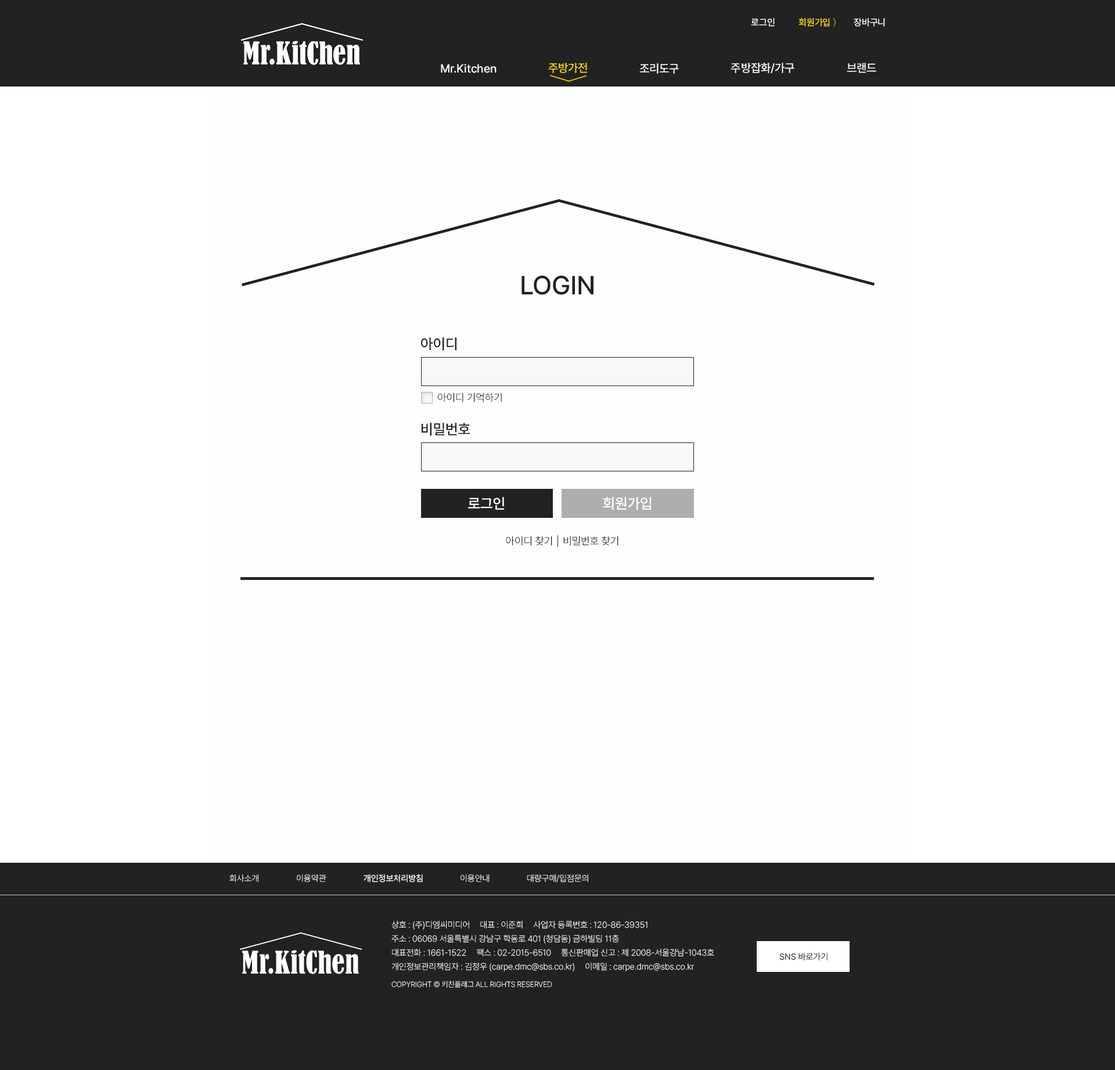
<style>
.page{position:relative;width:1115px;height:1070px;background:#fefefe}
.page>*{position:absolute;margin:0}
.t1{font:9.3px "Pretendard-Regular";letter-spacing:-0.005em;color:#ffffff}
.t2{font:9.3px "Pretendard-Regular";letter-spacing:-0.005em;color:#ffd801}
.t3{font:11.6px "Pretendard-Medium";letter-spacing:-0.005em;color:#ffffff}
.t4{font:11.6px "Pretendard-Medium";letter-spacing:-0.005em;color:#ffd801}
.t5{font:26.1px "PretendardVariable-Medium";letter-spacing:-0.005em;color:#222222}
.t6{font:14.5px "PretendardVariable-Medium";letter-spacing:-0.005em;color:#222222}
.t7{font:10.4px "PretendardVariable-Light";letter-spacing:-0.005em;color:#222222}
.t8{font:14.5px "PretendardVariable-Medium";letter-spacing:-0.005em;color:#ffffff}
.t9{font:8.7px "PretendardVariable-ExtraLight";letter-spacing:-0.005em;color:#ffffff}
.t10{font:8.7px "PretendardVariable-ExtraLight";letter-spacing:-0.005em}
.t11{font:8.7px "PretendardVariable-Regular";letter-spacing:-0.005em;color:#ffffff}
.t12{font:8.7px/13.9px "PretendardVariable-ExtraLight";letter-spacing:-0.005em;color:#fefefe}
.t13{font:8.7px "PretendardVariable-ExtraLight";letter-spacing:-0.005em;color:#fefefe}
.t14{font:7.5px/17.4px "PretendardVariable-ExtraLight";letter-spacing:-0.005em;color:#fefefe}
.t15{font:8.7px "PretendardVariable-Regular";letter-spacing:-0.005em;color:#333333}
</style>
<div class="page">
<p class="t1" style="left:751px;top:18px;width:23px;height:9px">로그인</p>
<p class="t2" style="left:798px;top:18px;width:32px;height:9px">회원가입</p>
<p class="t1" style="left:853px;top:18px;width:32px;height:9px">장바구니</p>
<p class="t3" style="left:441px;top:64px;width:55px;height:9px">Mr.Kitchen</p>
<p class="t4" style="left:548px;top:63px;width:39px;height:10px">주방가전</p>
<p class="t3" style="left:639px;top:63px;width:40px;height:11px">조리도구</p>
<p class="t3" style="left:730px;top:63px;width:64px;height:10px">주방잡화/가구</p>
<p class="t3" style="left:846px;top:63px;width:30px;height:10px">브랜드</p>
<p class="t5" style="left:521px;top:275px;width:72px;height:20px">LOGIN</p>
<p class="t6" style="left:420px;top:337px;width:37px;height:14px">아이디</p>
<p class="t7" style="left:437px;top:392px;width:65px;height:10px">아이디 기억하기</p>
<p class="t6" style="left:421px;top:423px;width:49px;height:13px">비밀번호</p>
<p class="t8" style="left:468px;top:497px;width:36px;height:13px">로그인</p>
<p class="t8" style="left:603px;top:497px;width:48px;height:13px">회원가입</p>
<p class="t7" style="left:506px;top:536px;width:46px;height:10px">아이디 찾기</p>
<p class="t7" style="left:563px;top:536px;width:55px;height:10px">비밀번호 찾기</p>
<p class="t9" style="left:229px;top:874px;width:29px;height:8px">회사소개</p>
<p class="t10" style="left:297px;top:874px;width:29px;height:8px">이용약관</p>
<p class="t11" style="left:363px;top:874px;width:60px;height:8px">개인정보처리방침</p>
<p class="t9" style="left:460px;top:874px;width:29px;height:8px">이용안내</p>
<p class="t9" style="left:527px;top:874px;width:61px;height:8px">대량구매/입점문의</p>
<p class="t12" style="left:391px;top:921px;width:323px;height:67px">상호 : (주)디엠씨미디어     대표 : 이준희     사업자 등록번호 : 120-86-39351<br>주소 : 06069 서울특별시 강남구 학동로 401 (청담동) 금하빌딩 11층<br>대표전화 : 1661-1522     팩스 : 02-2015-6510     통신판매업 신고 : 제 2008-서울강남-1043호<br>개인정보관리책임자 : 김정우 (carpe.dmc@sbs.co.kr)     이메일 : carpe.dmc@sbs.co.k<span class="t13">r<br></span><span class="t14">COPYRIGHT © 키친플래그 ALL RIGHTS RESERVED</span></p>
<p class="t15" style="left:779px;top:953px;width:48px;height:8px">SNS 바로가기</p>
</div>
